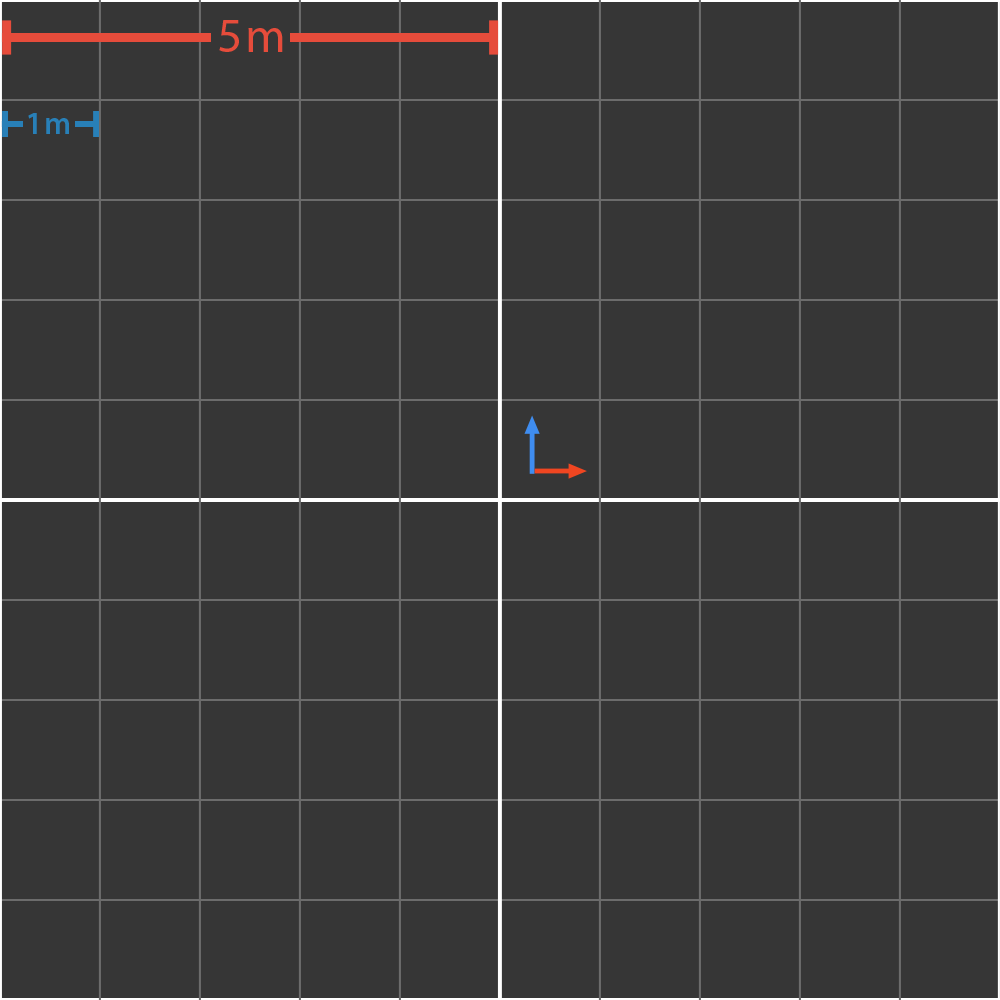
<style>
.page{position:relative;width:1000px;height:1000px;background:#363636}
.page>*{position:absolute;margin:0}
.t1{font:48.9px "MyriadPro-Regular";letter-spacing:0.06em;color:#e64c3b}
.t2{font:32.3px "MyriadPro-Semibold";letter-spacing:0.06em;color:#2880b8}
</style>
<div class="page">
<p class="t1" style="left:219px;top:20px;width:64px;height:32px">5m</p>
<p class="t2" style="left:28px;top:113px;width:41px;height:21px">1m</p>
</div>
